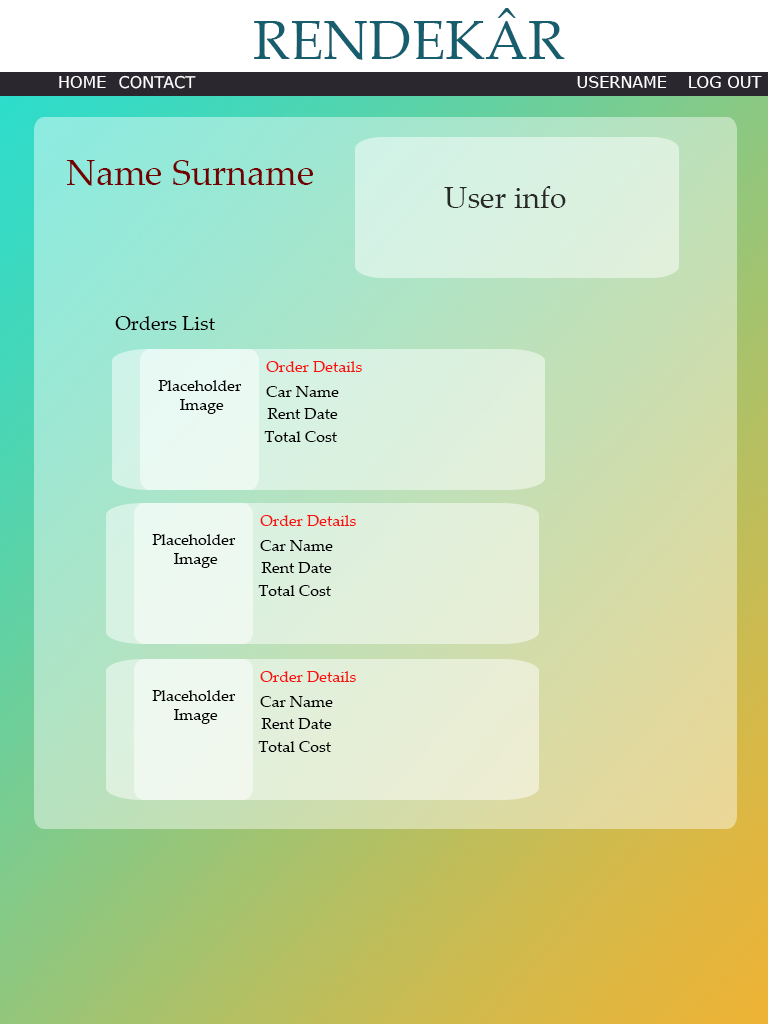
<style>
.page{position:relative;width:768px;height:1024px}
.page>*{position:absolute;margin:0}
.t1{font:55px "PalatinoLinotype-Roman";color:#165e6d}
.t2{font:16px "Verdana";color:#ffffff}
.t3{font:36px "PalatinoLinotype-Roman";color:#720202}
.t4{font:30px "PalatinoLinotype-Roman";color:#282828}
.t5{font:20px "PalatinoLinotype-Roman";color:#000000}
.t6{font:16px "PalatinoLinotype-Roman";color:#f81212}
.t7{font:16px "PalatinoLinotype-Roman";color:#000000}
</style>
<div class="page">
<p class="t1" style="left:254px;top:8px;width:311px;height:52px">RENDEKÂR</p>
<p class="t2" style="left:59px;top:76px;width:47px;height:12px">HOME</p>
<p class="t2" style="left:119px;top:75px;width:77px;height:14px">CONTACT</p>
<p class="t2" style="left:577px;top:76px;width:90px;height:12px">USERNAME</p>
<p class="t2" style="left:689px;top:76px;width:73px;height:12px">LOG OUT</p>
<p class="t3" style="left:66px;top:160px;width:247px;height:26px">Name Surname</p>
<p class="t4" style="left:444px;top:186px;width:122px;height:22px">User info</p>
<p class="t5" style="left:115px;top:316px;width:100px;height:14px">Orders List</p>
<p class="t6" style="left:266px;top:361px;width:96px;height:11px">Order Details</p>
<p class="t7" style="left:158px;top:380px;width:84px;height:34px;text-align:center">Placeholder <br>Image</p>
<p class="t7" style="left:266px;top:386px;width:73px;height:11px">Car Name</p>
<p class="t7" style="left:267px;top:408px;width:71px;height:11px">Rent Date</p>
<p class="t7" style="left:264px;top:431px;width:73px;height:11px">Total Cost</p>
<p class="t6" style="left:260px;top:515px;width:96px;height:11px">Order Details</p>
<p class="t7" style="left:152px;top:534px;width:84px;height:34px;text-align:center">Placeholder <br>Image</p>
<p class="t7" style="left:260px;top:540px;width:73px;height:11px">Car Name</p>
<p class="t7" style="left:261px;top:562px;width:71px;height:11px">Rent Date</p>
<p class="t7" style="left:258px;top:585px;width:73px;height:11px">Total Cost</p>
<p class="t6" style="left:260px;top:671px;width:96px;height:11px">Order Details</p>
<p class="t7" style="left:152px;top:690px;width:84px;height:34px;text-align:center">Placeholder <br>Image</p>
<p class="t7" style="left:260px;top:696px;width:73px;height:11px">Car Name</p>
<p class="t7" style="left:261px;top:718px;width:71px;height:11px">Rent Date</p>
<p class="t7" style="left:258px;top:741px;width:73px;height:11px">Total Cost</p>
</div>
